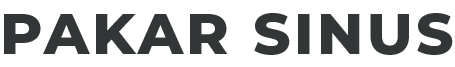
<style>
.page{position:relative;width:455px;height:67px;background:#ffffff}
.page>*{position:absolute;margin:0}
.t1{font:57.8px "Montserrat-ExtraBold";letter-spacing:0.06em;color:#323637}
</style>
<div class="page">
<p class="t1" style="left:4px;top:13px;width:449px;height:42px">PAKAR SINUS</p>
</div>
